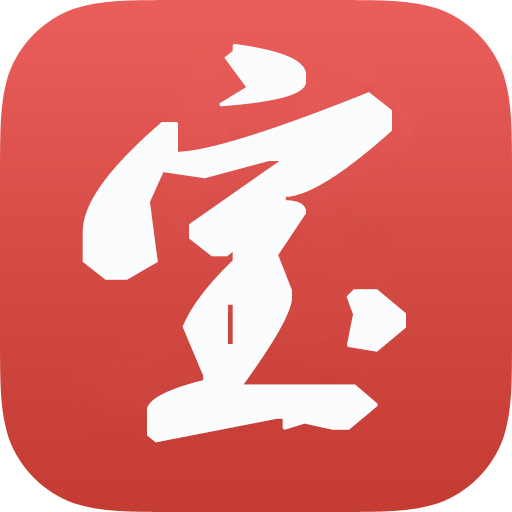
<style>
.page{position:relative;width:512px;height:512px}
.page>*{position:absolute;margin:0}
.t1{font:400px "2.0-";color:#fafcfd;font-weight:bold}
</style>
<div class="page">
<p class="t1" style="left:82px;top:44px;width:324px;height:399px">宝</p>
</div>
